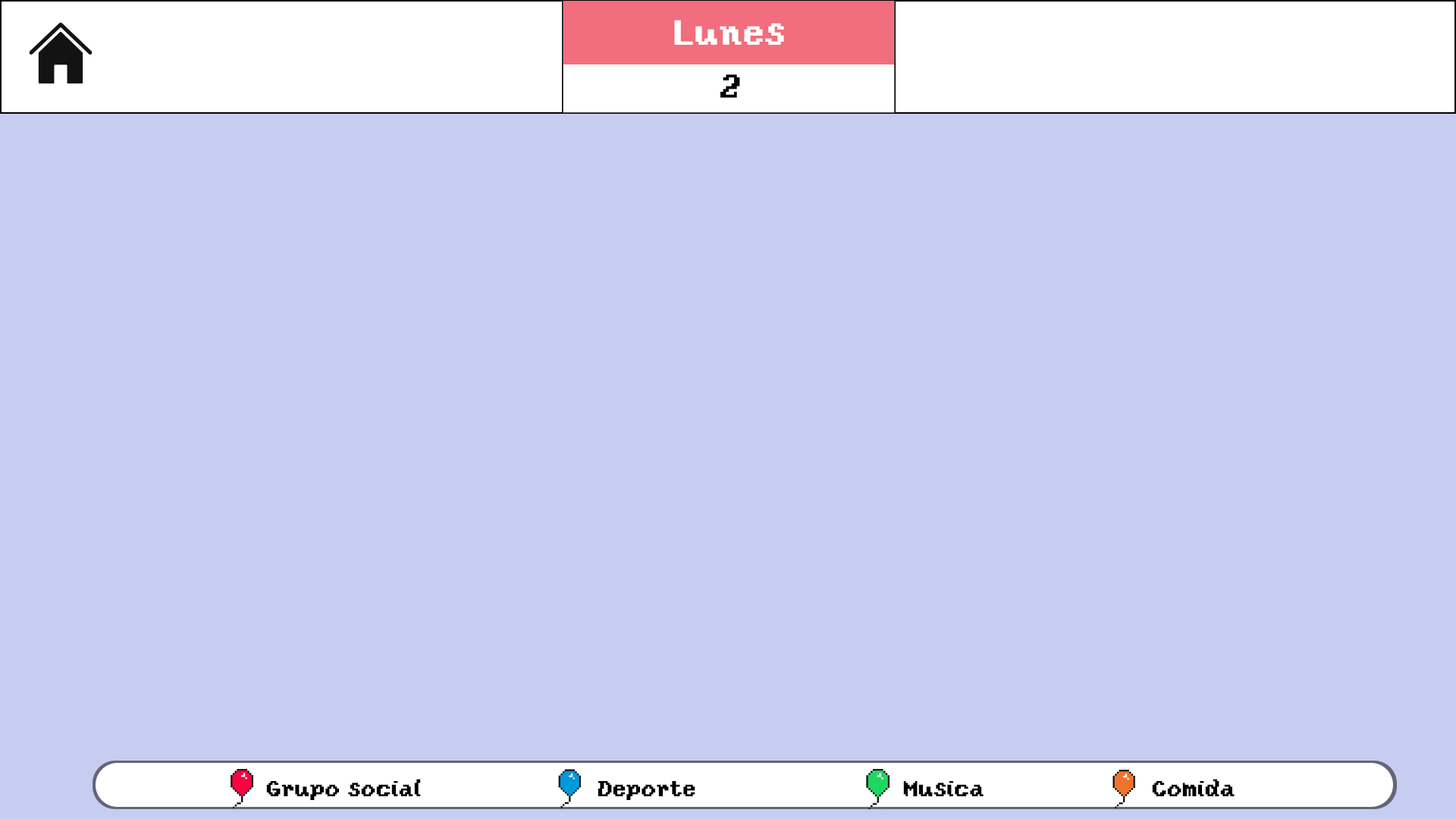
<style>
.page{position:relative;width:1456px;height:819px;background:#c6cdf0}
.page>*{position:absolute;margin:0}
.t1{font:36.4px "YosterIslandReg";color:#ffffff}
.t2{font:34.5px "YosterIslandReg";color:#000000;scale:0.95 1}
.t3{font:22.7px "YosterIslandReg";color:#000000}
</style>
<div class="page">
<p class="t1" style="left:674px;top:20px;width:110px;height:25px">Lunes</p>
<p class="t2" style="left:720px;top:74px;width:20px;height:24px">2</p>
<p class="t3" style="left:266px;top:779px;width:155px;height:21px">Grupo social</p>
<p class="t3" style="left:598px;top:781px;width:97px;height:19px">Deporte</p>
<p class="t3" style="left:903px;top:781px;width:81px;height:15px">Musica</p>
<p class="t3" style="left:1152px;top:779px;width:83px;height:17px">Comida</p>
</div>
